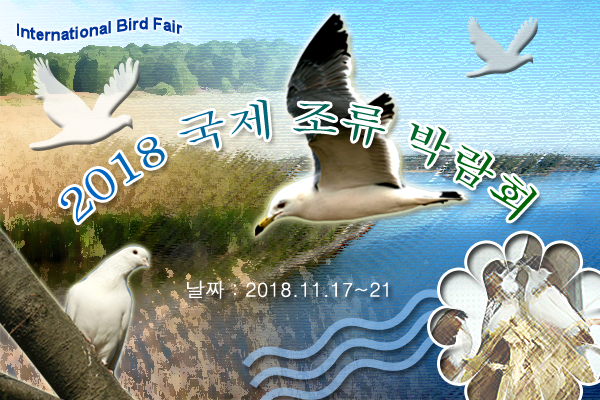
<style>
.page{position:relative;width:600px;height:400px}
.page>*{position:absolute;margin:0}
.t1{font:16px "Arial-BoldMT";color:#003399}
.t2{font:42px "Batang"}
.t3{font:20px "Dotum";color:#ffffff}
</style>
<div class="page">
<p class="t1" style="left:17px;top:17px;width:166px;height:24px">International Bird Fair</p>
<p class="t2" style="left:61px;top:99px;width:476px;height:124px">2018 국제 조류 박람회</p>
<p class="t3" style="left:187px;top:280px;width:201px;height:19px">날짜 : 2018.11.17~21</p>
</div>
